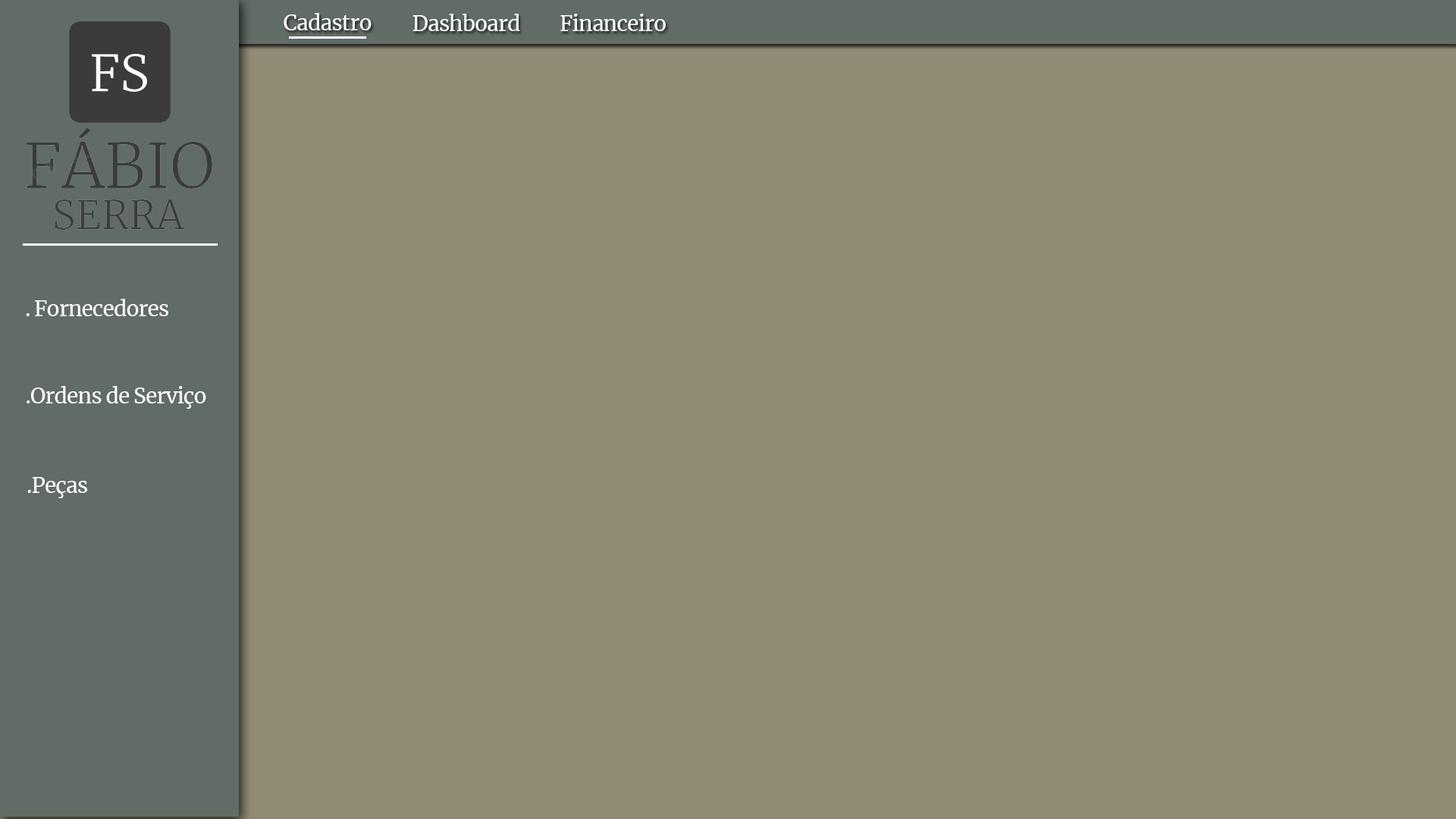
<style>
.page{position:relative;width:1456px;height:819px;background:#918b76}
.page>*{position:absolute;margin:0}
.t1{font:21.2px "Merriweather-Regular";letter-spacing:-0.03em;color:#ffffff}
</style>
<div class="page">
<p class="t1" style="left:284px;top:13px;width:88px;height:17px">Cadastro</p>
<p class="t1" style="left:413px;top:14px;width:107px;height:17px">Dashboard</p>
<p class="t1" style="left:560px;top:14px;width:106px;height:17px">Financeiro</p>
<p class="t1" style="left:26px;top:299px;width:142px;height:17px">. Fornecedores</p>
<p class="t1" style="left:27px;top:386px;width:179px;height:23px">.Ordens de Serviço</p>
<p class="t1" style="left:27px;top:477px;width:60px;height:21px">.Peças</p>
</div>
